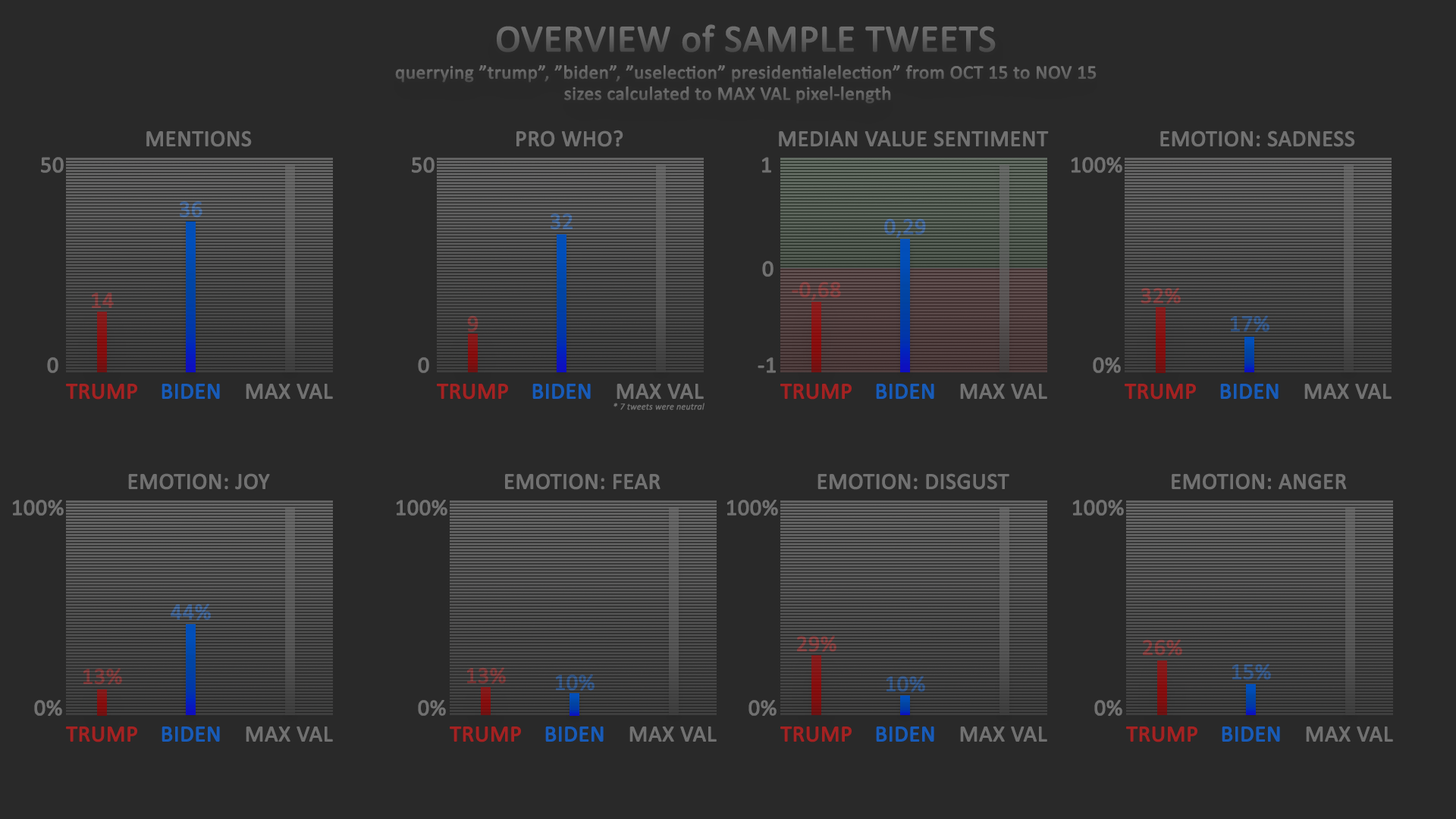
<style>
.page{position:relative;width:1456px;height:819px;background:#292929}
.page>*{position:absolute;margin:0}
.t1{font:37.9px "Calibri";color:#616161;font-weight:bold}
.t2{font:19px "Calibri";color:#656565;font-weight:bold}
.t3{font:19px "Calibri";color:#626262;font-weight:bold}
.t4{font:22.7px "Calibri";color:#717171;font-weight:bold}
.t5{font:22.7px "Calibri";font-weight:bold}
.t6{font:22.7px "Calibri";color:#5375a3;font-weight:bold}
.t7{font:22.7px "Calibri";color:#5374a2;font-weight:bold}
.t8{font:22.7px "Calibri";color:#8b4b4b;font-weight:bold}
.t9{font:22.7px "Calibri";color:#894949;font-weight:bold}
.t10{font:22.7px "Calibri";color:#8a4a4a;font-weight:bold}
.t11{font:22.7px "Calibri";color:#3f618e;font-weight:bold}
.t12{font:22.7px "Calibri";color:#a32222;font-weight:bold}
.t13{font:22.7px "Calibri";color:#185bb7;font-weight:bold}
.t14{font:9.1px "Calibri-LightItalic";color:#717171;font-weight:bold}
.t15{font:22.7px "Calibri";color:#4b6c9a;font-weight:bold}
.t16{font:22.7px "Calibri";color:#894848;font-weight:bold}
.t17{font:22.7px "Calibri";color:#3e608d;font-weight:bold}
.t18{font:22.7px "Calibri";color:#844343;font-weight:bold}
.t19{font:22.7px "Calibri";color:#834343;font-weight:bold}
.t20{font:22.7px "Calibri";color:#3d5e8c;font-weight:bold}
</style>
<div class="page">
<p class="t1" style="left:497px;top:24px;width:499px;height:28px">OVERVIEW of SAMPLE TWEETS</p>
<p class="t2" style="left:395px;top:65px;width:702px;height:18px">querrying ”trump”, ”biden”, ”uselection” presidentialelection” from OCT 15 to NOV 15</p>
<p class="t3" style="left:564px;top:86px;width:327px;height:18px">sizes calculated to MAX VAL pixel-length</p>
<p class="t4" style="left:146px;top:130px;width:106px;height:17px">MENTIONS</p>
<p class="t4" style="left:516px;top:130px;width:107px;height:17px">PRO WHO?</p>
<p class="t4" style="left:779px;top:130px;width:270px;height:17px">MEDIAN VALUE SENTIMENT</p>
<p class="t4" style="left:1160px;top:130px;width:195px;height:17px">EMOTION: SADNESS</p>
<p class="t4" style="left:41px;top:157px;width:23px;height:16px">50</p>
<p class="t4" style="left:412px;top:157px;width:23px;height:16px">50</p>
<p class="t4" style="left:762px;top:157px;width:9px;height:16px">1</p>
<p class="t4" style="left:1071px;top:157px;width:51px;height:16px">100%</p>
<p class="t5" style="left:180px;top:201px;width:22px;height:17px">36</p>
<p class="t6" style="left:551px;top:213px;width:22px;height:17px">32</p>
<p class="t7" style="left:884px;top:218px;width:42px;height:20px">0,29</p>
<p class="t4" style="left:762px;top:261px;width:11px;height:16px">0</p>
<p class="t8" style="left:792px;top:281px;width:49px;height:20px">-0,68</p>
<p class="t9" style="left:92px;top:293px;width:22px;height:15px">14</p>
<p class="t10" style="left:1141px;top:287px;width:40px;height:17px">32%</p>
<p class="t5" style="left:467px;top:315px;width:12px;height:17px">9</p>
<p class="t11" style="left:1231px;top:315px;width:38px;height:17px">17%</p>
<p class="t4" style="left:47px;top:357px;width:11px;height:16px">0</p>
<p class="t4" style="left:418px;top:357px;width:11px;height:16px">0</p>
<p class="t4" style="left:758px;top:357px;width:18px;height:16px">-1</p>
<p class="t4" style="left:1093px;top:357px;width:28px;height:16px">0%</p>
<p class="t12" style="left:66px;top:384px;width:71px;height:16px">TRUMP</p>
<p class="t13" style="left:162px;top:384px;width:58px;height:15px">BIDEN</p>
<p class="t4" style="left:246px;top:384px;width:87px;height:15px">MAX VAL</p>
<p class="t12" style="left:437px;top:384px;width:71px;height:16px">TRUMP</p>
<p class="t13" style="left:532px;top:384px;width:59px;height:15px">BIDEN</p>
<p class="t4" style="left:617px;top:384px;width:87px;height:15px">MAX VAL</p>
<p class="t12" style="left:780px;top:384px;width:72px;height:16px">TRUMP</p>
<p class="t13" style="left:876px;top:384px;width:58px;height:15px">BIDEN</p>
<p class="t4" style="left:960px;top:384px;width:87px;height:15px">MAX VAL</p>
<p class="t12" style="left:1125px;top:384px;width:71px;height:16px">TRUMP</p>
<p class="t13" style="left:1220px;top:384px;width:59px;height:15px">BIDEN</p>
<p class="t4" style="left:1304px;top:384px;width:88px;height:15px">MAX VAL</p>
<p class="t14" style="left:613px;top:403px;width:91px;height:7px">* 7 tweets were neutral</p>
<p class="t4" style="left:128px;top:473px;width:142px;height:17px">EMOTION: JOY</p>
<p class="t4" style="left:505px;top:473px;width:155px;height:17px">EMOTION: FEAR</p>
<p class="t4" style="left:817px;top:473px;width:192px;height:17px">EMOTION: DISGUST</p>
<p class="t4" style="left:1172px;top:473px;width:175px;height:17px">EMOTION: ANGER</p>
<p class="t4" style="left:12px;top:500px;width:52px;height:16px">100%</p>
<p class="t4" style="left:396px;top:500px;width:51px;height:16px">100%</p>
<p class="t4" style="left:726px;top:500px;width:52px;height:16px">100%</p>
<p class="t4" style="left:1072px;top:500px;width:52px;height:16px">100%</p>
<p class="t15" style="left:171px;top:604px;width:40px;height:16px">44%</p>
<p class="t9" style="left:797px;top:635px;width:39px;height:17px">29%</p>
<p class="t16" style="left:1143px;top:639px;width:39px;height:17px">26%</p>
<p class="t17" style="left:1232px;top:664px;width:39px;height:16px">15%</p>
<p class="t18" style="left:83px;top:668px;width:39px;height:17px">13%</p>
<p class="t19" style="left:467px;top:667px;width:39px;height:17px">13%</p>
<p class="t20" style="left:556px;top:674px;width:39px;height:17px">10%</p>
<p class="t20" style="left:886px;top:676px;width:39px;height:16px">10%</p>
<p class="t4" style="left:34px;top:700px;width:28px;height:16px">0%</p>
<p class="t4" style="left:418px;top:700px;width:28px;height:16px">0%</p>
<p class="t4" style="left:748px;top:700px;width:29px;height:16px">0%</p>
<p class="t4" style="left:1094px;top:700px;width:28px;height:16px">0%</p>
<p class="t12" style="left:66px;top:726px;width:71px;height:16px">TRUMP</p>
<p class="t13" style="left:162px;top:726px;width:58px;height:16px">BIDEN</p>
<p class="t4" style="left:246px;top:726px;width:87px;height:16px">MAX VAL</p>
<p class="t12" style="left:450px;top:726px;width:71px;height:16px">TRUMP</p>
<p class="t13" style="left:545px;top:726px;width:59px;height:16px">BIDEN</p>
<p class="t4" style="left:629px;top:726px;width:88px;height:16px">MAX VAL</p>
<p class="t12" style="left:780px;top:726px;width:72px;height:16px">TRUMP</p>
<p class="t13" style="left:876px;top:726px;width:58px;height:16px">BIDEN</p>
<p class="t4" style="left:960px;top:726px;width:87px;height:16px">MAX VAL</p>
<p class="t12" style="left:1126px;top:726px;width:71px;height:16px">TRUMP</p>
<p class="t13" style="left:1222px;top:726px;width:58px;height:16px">BIDEN</p>
<p class="t4" style="left:1306px;top:726px;width:87px;height:16px">MAX VAL</p>
</div>
